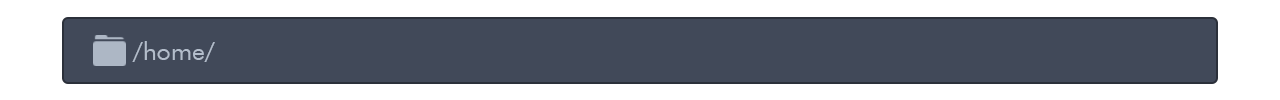
<style>
.page{position:relative;width:1280px;height:100px;background:#414959}
.page>*{position:absolute;margin:0}
.t1{font:24.9px "FuturaBT-Book";color:#b3bdcb}
</style>
<div class="page">
<p class="t1" style="left:132px;top:41px;width:83px;height:21px">/home/</p>
</div>
